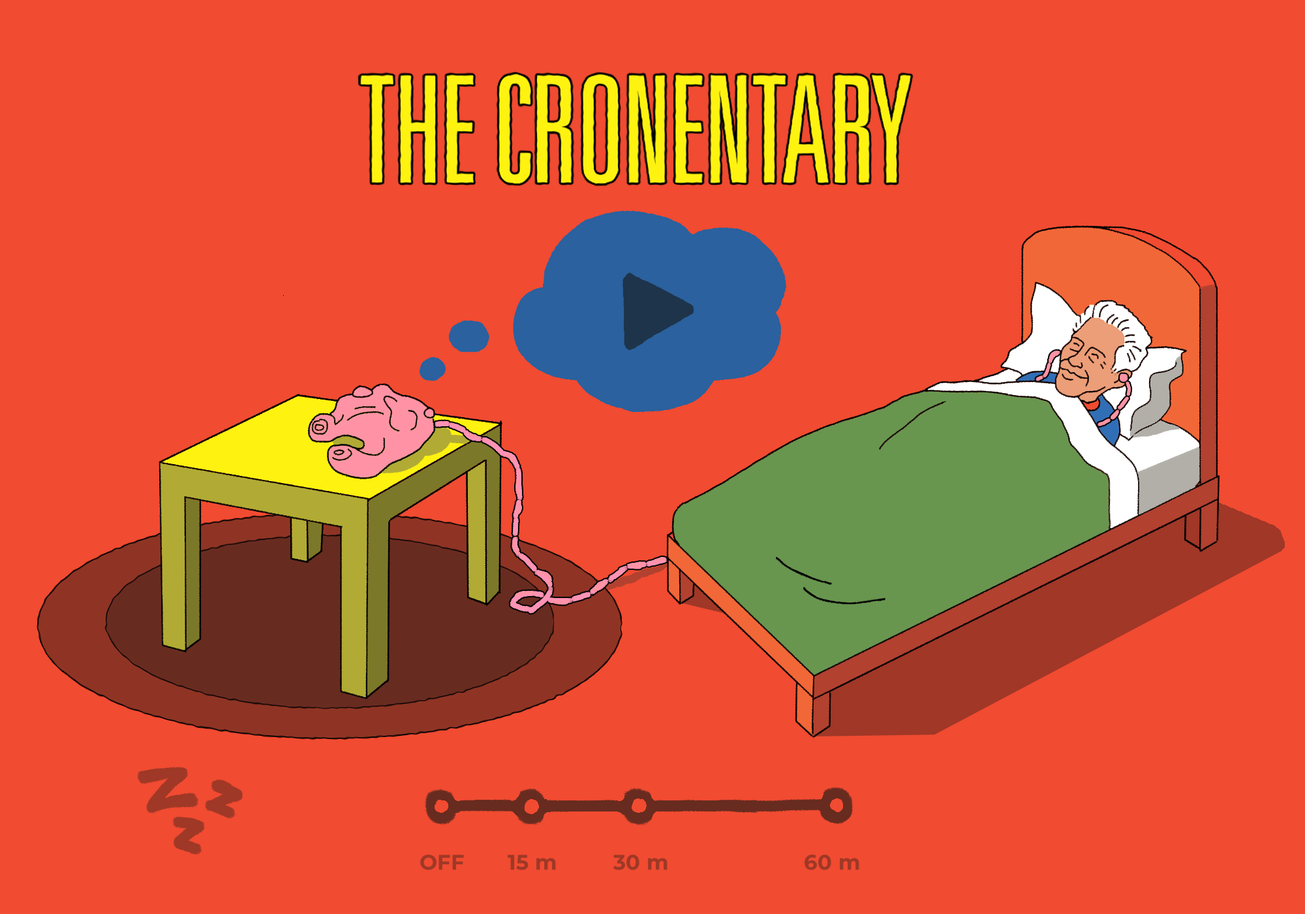
<style>
.page{position:relative;width:1305px;height:914px;background:#f14b31}
.page>*{position:absolute;margin:0}
.t1{font:20.9px "MontserratRoman-Bold";letter-spacing:0.02em;color:#9f3826}
</style>
<div class="page">
<p class="t1" style="left:420px;top:854px;width:44px;height:16px">OFF</p>
<p class="t1" style="left:508px;top:854px;width:48px;height:16px">15 m</p>
<p class="t1" style="left:613px;top:854px;width:55px;height:16px">30 m</p>
<p class="t1" style="left:805px;top:854px;width:54px;height:16px">60 m</p>
</div>
